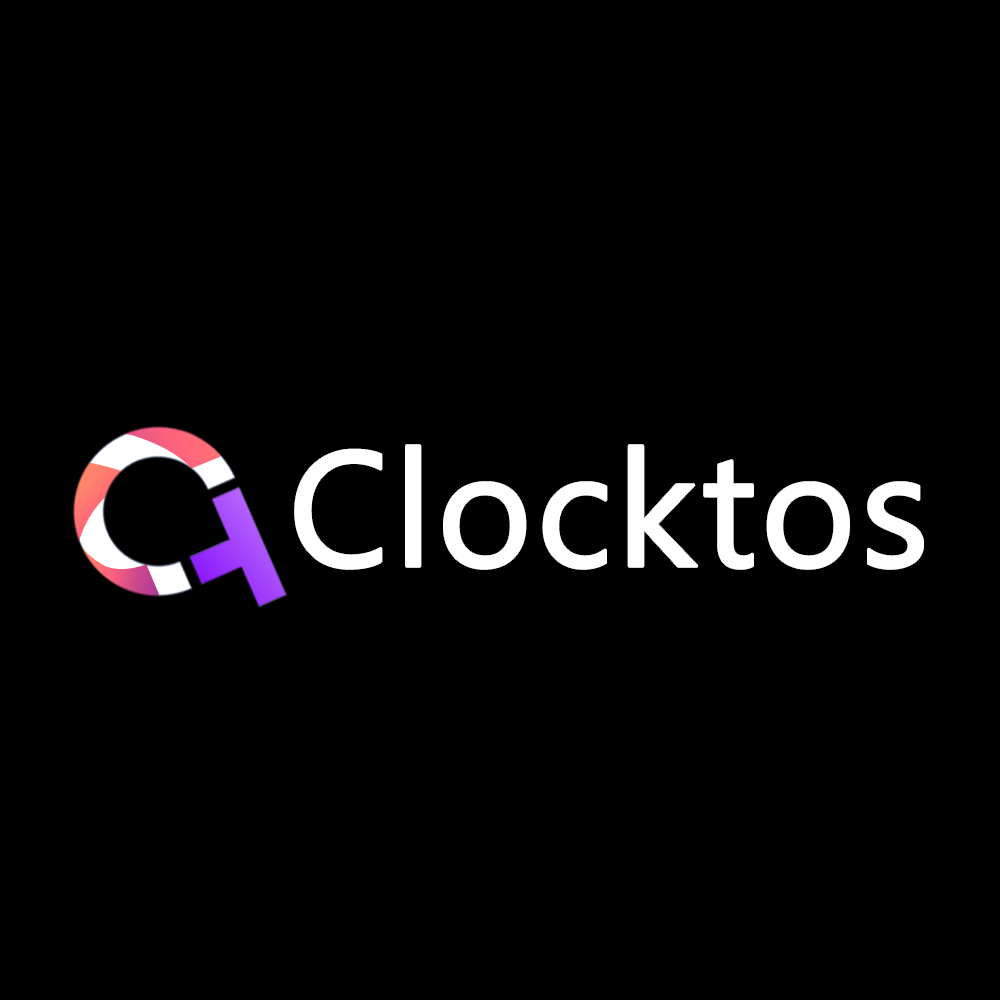
<style>
.page{position:relative;width:1000px;height:1000px;background:#000000}
.page>*{position:absolute;margin:0}
.t1{font:162.5px "NirmalaUI";color:#ffffff;font-weight:bold}
</style>
<div class="page">
<p class="t1" style="left:295px;top:445px;width:628px;height:124px">Clocktos</p>
</div>
